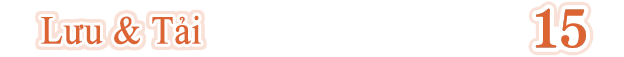
<style>
.page{position:relative;width:624px;height:57px;background:#ffffff}
.page>*{position:absolute;margin:0}
.t1{font:39.6px "TimesNewRomanPSMT";color:#dc6432;font-weight:bold;scale:0.91 1}
</style>
<div class="page">
<p class="t1" style="left:41px;top:15px;width:160px;height:30px">Lưu &amp; Tải</p>
</div>
